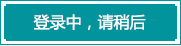
<style>
.page{position:relative;width:181px;height:46px;background:#02949d}
.page>*{position:absolute;margin:0}
.t1{font:16px "MicrosoftYaHeiUI";color:#ffffff}
</style>
<div class="page">
<p class="t1" style="left:33px;top:14px;width:113px;height:16px">登录中，请稍后</p>
</div>
